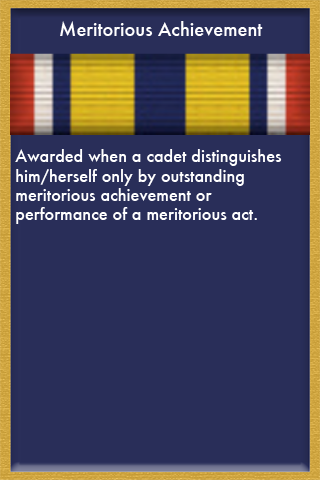
<style>
.page{position:relative;width:320px;height:480px;background:#292e59}
.page>*{position:absolute;margin:0}
.t1{font:18px "Futura-Medium";color:#ffffff}
.t2{font:16px "Futura-Medium";color:#ffffff}
</style>
<div class="page">
<p class="t1" style="left:60px;top:21px;width:203px;height:15px">Meritorious Achievement</p>
<p class="t2" style="left:15px;top:149px;width:267px;height:75px">Awarded when a cadet distinguishes <br>him/herself only by outstanding <br>meritorious achievement or <br>performance of a meritorious act.</p>
</div>
